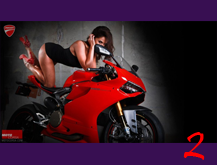
<style>
.page{position:relative;width:217px;height:165px;background:#380f52}
.page>*{position:absolute;margin:0}
.t1{font:48px "Pristina-Regular";color:#ff0000}
</style>
<div class="page">
<p class="t1" style="left:183px;top:132px;width:22px;height:28px">2</p>
</div>
